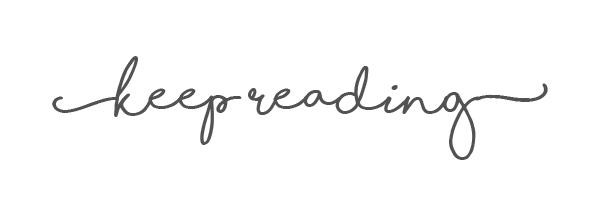
<style>
.page{position:relative;width:600px;height:200px;background:#ffffff}
.page>*{position:absolute;margin:0}
.t1{font:12px/125px "ShorelinesScriptBold";color:#525252}
</style>
<div class="page">
<p class="t1" style="left:52px;top:56px;width:496px;height:104px;text-align:center">[keep Reading]</p>
</div>
